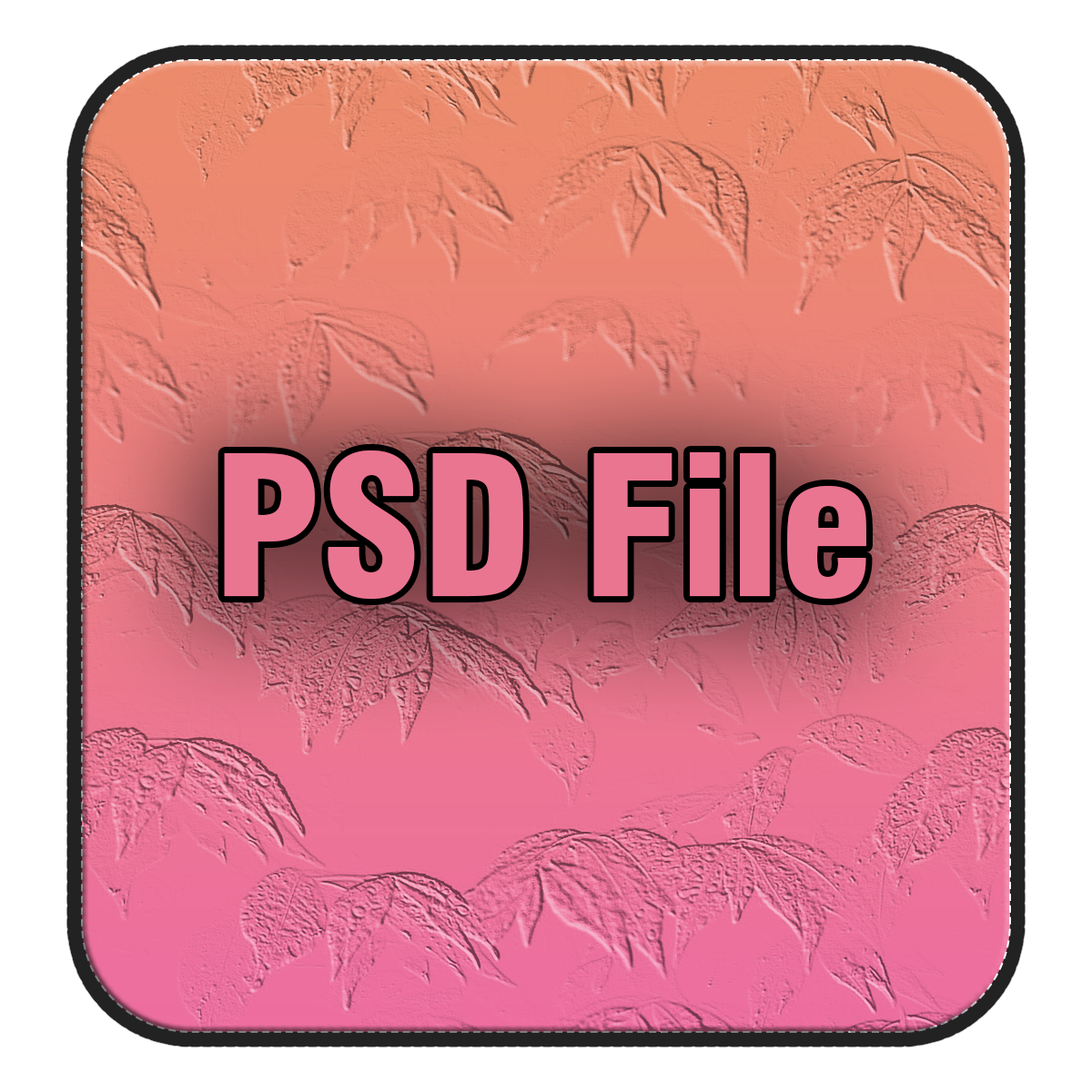
<style>
.page{position:relative;width:1092px;height:1092px}
.page>*{position:absolute;margin:0}
.t1{font:189.6px "Swiss721BT-BlackCondensed";color:#ea7591}
</style>
<div class="page">
<p class="t1" style="left:224px;top:450px;width:642px;height:149px">PSD File</p>
</div>
